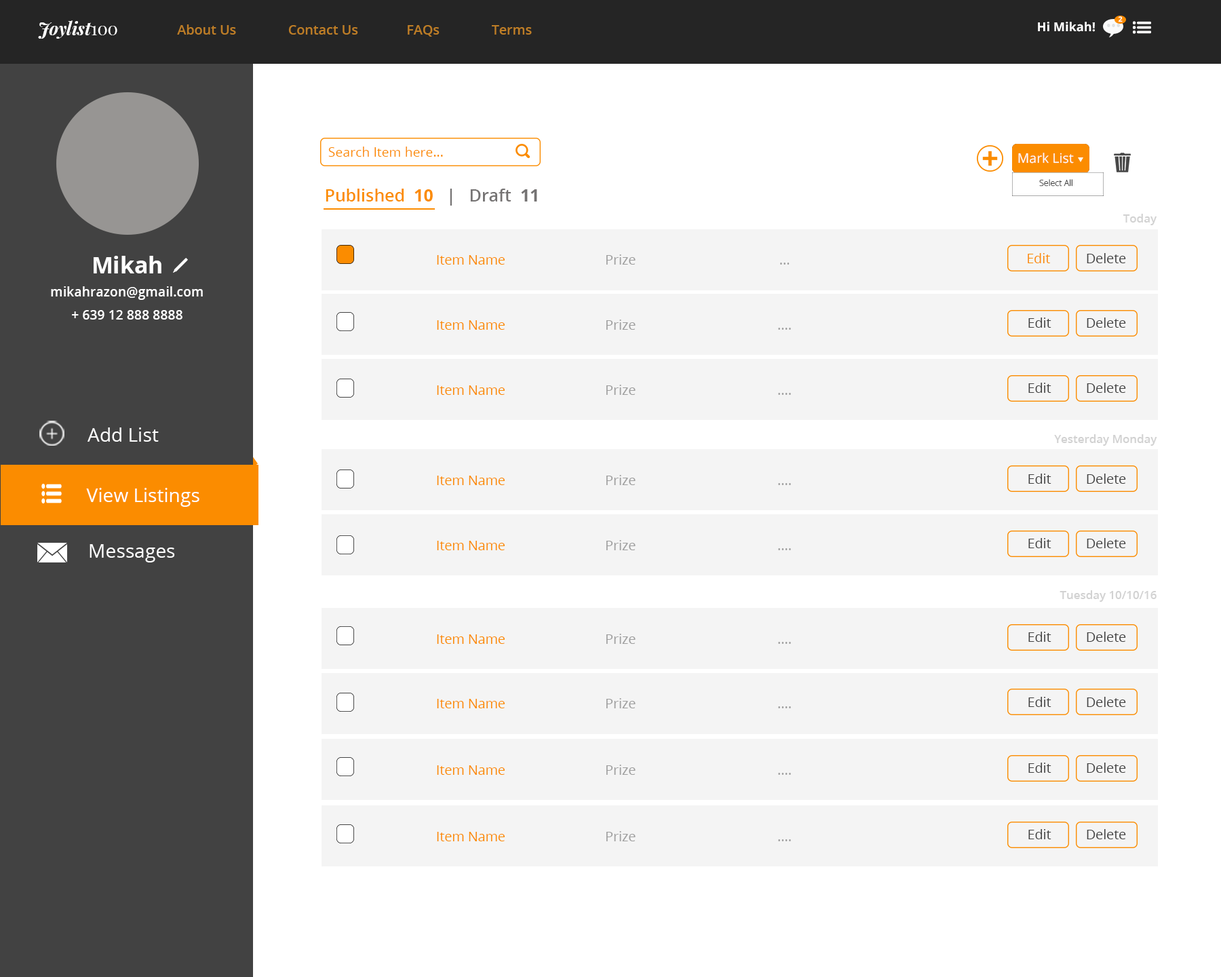
<style>
.page{position:relative;width:1221px;height:977px;background:#ffffff}
.page>*{position:absolute;margin:0}
.t1{font:7.1px "OpenSans-Bold";color:#fffefe}
.t2{font:17.5px "PlayfairDisplay-BoldItalic";color:#ffffff}
.t3{font:17.5px "PlayfairDisplay-Regular";color:#ffffff}
.t4{font:13.4px "OpenSans-Semibold";color:#bd7d26}
.t5{font:12.3px "OpenSans-Bold";color:#ffffff}
.t6{font:13.2px "OpenSans";color:#fb8c00}
.t7{font:13.2px "OpenSans";color:#fcfafa}
.t8{font:8.5px "OpenSans-Light";color:#474747}
.t9{font:17px "OpenSans-Semibold";color:#fb8c00}
.t10{font:17px "OpenSans-Semibold";color:#757373}
.t11{font:17px "OpenSans-Bold";color:#fb8c00}
.t12{font:17px "OpenSans-Bold";color:#757373}
.t13{font:11.4px "OpenSans-Semibold";color:#d2d2d2}
.t14{font:22.9px "OpenSans-Bold";color:#ffffff}
.t15{font:13.4px "OpenSans";color:#fb8c00}
.t16{font:13.4px "OpenSans";color:#9e9e9e}
.t17{font:13.4px "OpenSans";color:#424242}
.t18{font:13.2px "OpenSans-Semibold";color:#ffffff}
.t19{font:19.1px "OpenSans";color:#ffffff}
</style>
<div class="page">
<p class="t1" style="left:1118px;top:16px;width:5px;height:6px">2</p>
<p class="t2" style="left:38px;top:20px;width:79px;height:19px;text-align:justify">Joylist<span class="t3">100<br></span>t<span class="t3">100</span></p>
<p class="t4" style="left:177px;top:24px;width:355px;height:13px">About Us               Contact Us              FAQs               Terms</p>
<p class="t5" style="left:1038px;top:22px;width:57px;height:10px">Hi Mikah!</p>
<p class="t6" style="left:328px;top:147px;width:115px;height:10px">Search Item here...</p>
<p class="t7" style="left:1018px;top:153px;width:56px;height:10px">Mark List</p>
<p class="t8" style="left:1039px;top:179px;width:33px;height:8px">Select All</p>
<p class="t9" style="left:326px;top:189px;width:211px;height:17px"><span class="t10">               </span>           Published  <span class="t11">10   </span><span class="t10">|   Draft  </span><span class="t12">11</span></p>
<p class="t13" style="left:1123px;top:214px;width:33px;height:11px">Today</p>
<p class="t14" style="left:94px;top:256px;width:67px;height:17px">Mikah</p>
<p class="t15" style="left:437px;top:255px;width:68px;height:10px">Item Name</p>
<p class="t16" style="left:606px;top:254px;width:30px;height:11px">Prize</p>
<p class="t15" style="left:1028px;top:253px;width:22px;height:10px">Edit</p>
<p class="t17" style="left:1087px;top:253px;width:39px;height:10px">Delete</p>
<p class="t16" style="left:780px;top:262px;width:10px;height:3px">...</p>
<p class="t18" style="left:51px;top:286px;width:152px;height:14px">mikahrazon@gmail.com</p>
<p class="t18" style="left:72px;top:310px;width:110px;height:9px">+ 639 12 888 8888</p>
<p class="t17" style="left:1028px;top:317px;width:23px;height:11px">Edit</p>
<p class="t17" style="left:1087px;top:317px;width:39px;height:11px">Delete</p>
<p class="t15" style="left:437px;top:320px;width:68px;height:10px">Item Name</p>
<p class="t16" style="left:606px;top:319px;width:30px;height:11px">Prize</p>
<p class="t16" style="left:778px;top:328px;width:13px;height:2px">....</p>
<p class="t15" style="left:437px;top:385px;width:68px;height:10px">Item Name</p>
<p class="t16" style="left:606px;top:385px;width:30px;height:10px">Prize</p>
<p class="t17" style="left:1028px;top:383px;width:23px;height:10px">Edit</p>
<p class="t17" style="left:1087px;top:383px;width:39px;height:10px">Delete</p>
<p class="t16" style="left:778px;top:393px;width:13px;height:2px">....</p>
<p class="t19" style="left:87px;top:427px;width:72px;height:15px">Add List</p>
<p class="t13" style="left:1054px;top:434px;width:103px;height:12px">Yesterday Monday</p>
<p class="t17" style="left:1028px;top:473px;width:23px;height:11px">Edit</p>
<p class="t17" style="left:1087px;top:473px;width:39px;height:11px">Delete</p>
<p class="t15" style="left:437px;top:475px;width:68px;height:10px">Item Name</p>
<p class="t16" style="left:606px;top:475px;width:30px;height:10px">Prize</p>
<p class="t16" style="left:778px;top:483px;width:13px;height:2px">....</p>
<p class="t19" style="left:86px;top:488px;width:113px;height:19px">View Listings</p>
<p class="t19" style="left:90px;top:544px;width:85px;height:18px">Messages</p>
<p class="t15" style="left:437px;top:541px;width:68px;height:9px">Item Name</p>
<p class="t16" style="left:606px;top:540px;width:30px;height:10px">Prize</p>
<p class="t17" style="left:1028px;top:538px;width:23px;height:10px">Edit</p>
<p class="t17" style="left:1087px;top:538px;width:39px;height:10px">Delete</p>
<p class="t16" style="left:778px;top:548px;width:13px;height:2px">....</p>
<p class="t13" style="left:1059px;top:590px;width:97px;height:12px">Tuesday 10/10/16</p>
<p class="t15" style="left:437px;top:634px;width:68px;height:10px">Item Name</p>
<p class="t16" style="left:606px;top:633px;width:30px;height:11px">Prize</p>
<p class="t16" style="left:778px;top:642px;width:13px;height:2px">....</p>
<p class="t17" style="left:1028px;top:631px;width:23px;height:11px">Edit</p>
<p class="t17" style="left:1087px;top:631px;width:39px;height:11px">Delete</p>
<p class="t15" style="left:437px;top:699px;width:68px;height:9px">Item Name</p>
<p class="t16" style="left:606px;top:698px;width:30px;height:10px">Prize</p>
<p class="t17" style="left:1028px;top:697px;width:23px;height:10px">Edit</p>
<p class="t17" style="left:1087px;top:697px;width:39px;height:10px">Delete</p>
<p class="t16" style="left:778px;top:706px;width:13px;height:2px">....</p>
<p class="t15" style="left:437px;top:765px;width:68px;height:10px">Item Name</p>
<p class="t16" style="left:606px;top:764px;width:30px;height:11px">Prize</p>
<p class="t16" style="left:778px;top:773px;width:13px;height:2px">....</p>
<p class="t17" style="left:1028px;top:762px;width:23px;height:11px">Edit</p>
<p class="t17" style="left:1087px;top:762px;width:39px;height:11px">Delete</p>
<p class="t15" style="left:437px;top:832px;width:68px;height:9px">Item Name</p>
<p class="t16" style="left:606px;top:831px;width:30px;height:10px">Prize</p>
<p class="t17" style="left:1028px;top:829px;width:23px;height:10px">Edit</p>
<p class="t17" style="left:1087px;top:829px;width:39px;height:10px">Delete</p>
<p class="t16" style="left:778px;top:839px;width:13px;height:2px">....</p>
</div>
